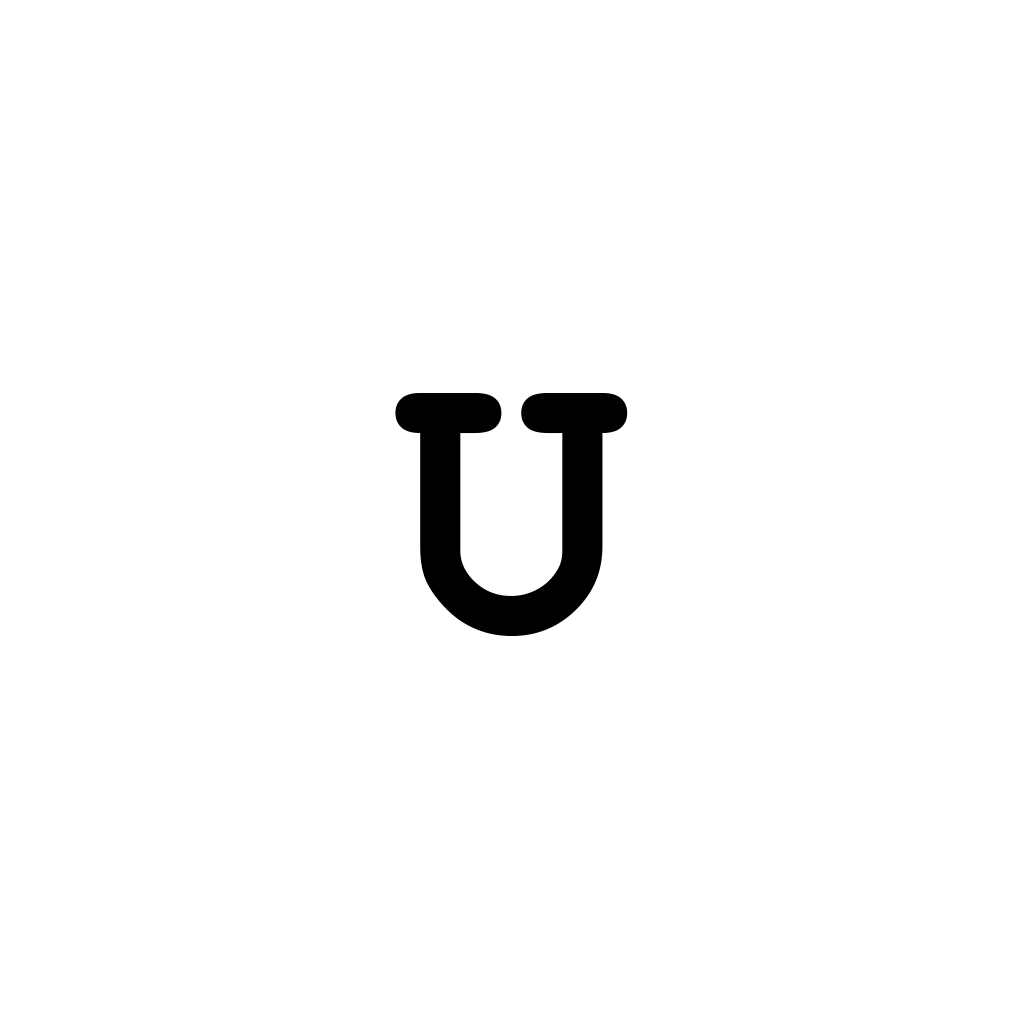
<style>
.page{position:relative;width:1024px;height:1024px;background:#ffffff}
.page>*{position:absolute;margin:0}
.t1{font:400px "CourierNewPS-BoldMT";color:#000000}
</style>
<div class="page">
<p class="t1" style="left:395px;top:393px;width:233px;height:243px">U</p>
</div>
